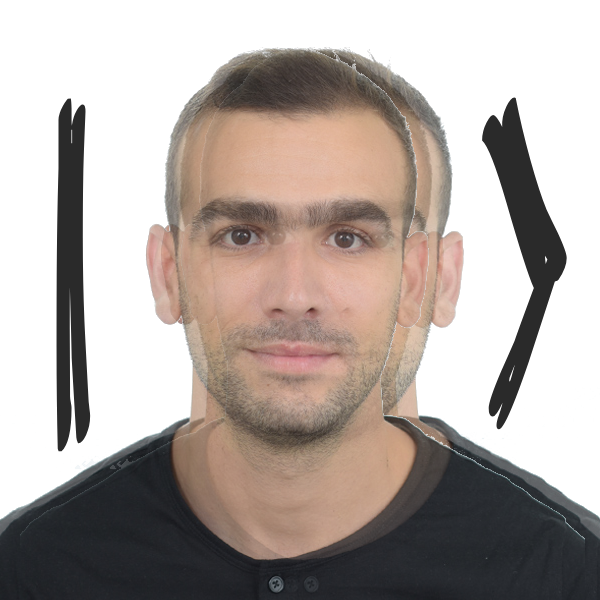
<style>
.page{position:relative;width:600px;height:600px;background:#ffffff}
.page>*{position:absolute;margin:0}
.t1{font:408px "AnuDaw";color:#2a2a2a;scale:0.37 1}
</style>
<div class="page">
<p class="t1" style="left:56px;top:97px;width:511px;height:355px">|   &gt;</p>
</div>
